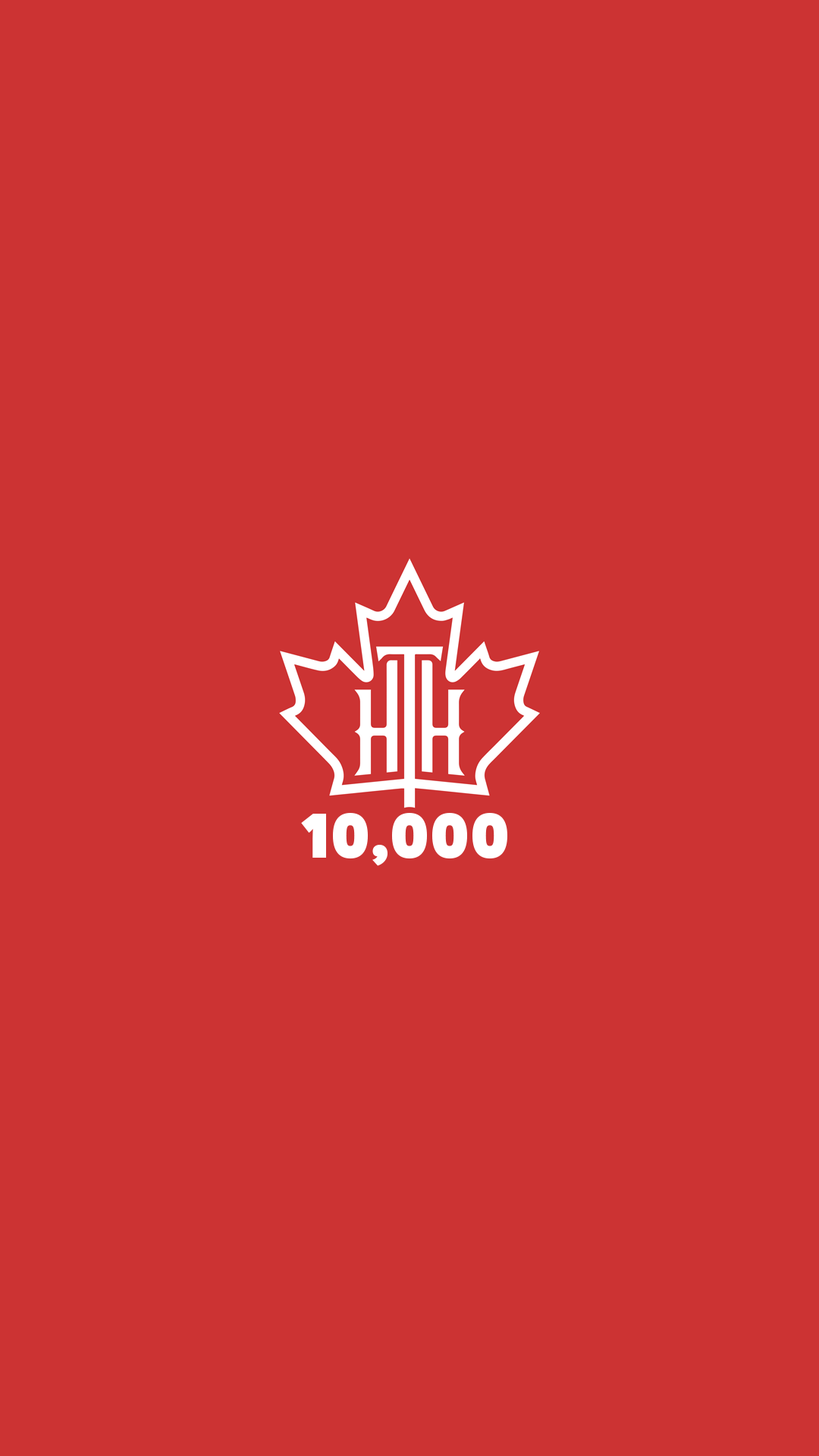
<style>
.page{position:relative;width:819px;height:1456px;background:#cc3333}
.page>*{position:absolute;margin:0}
.t1{font:78.1px "Novecentosans-UltraBold";color:#ffffff}
</style>
<div class="page">
<p class="t1" style="left:301px;top:813px;width:206px;height:53px">10,000</p>
</div>
